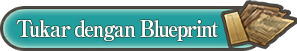
<style>
.page{position:relative;width:297px;height:51px}
.page>*{position:absolute;margin:0}
.t1{font:23px "RyuminPro-ExBold";letter-spacing:-0.08em;color:#ffffff;scale:0.9 1}
</style>
<div class="page">
<p class="t1" style="left:16px;top:20px;width:203px;height:21px">Tukar dengan Blueprint</p>
</div>
